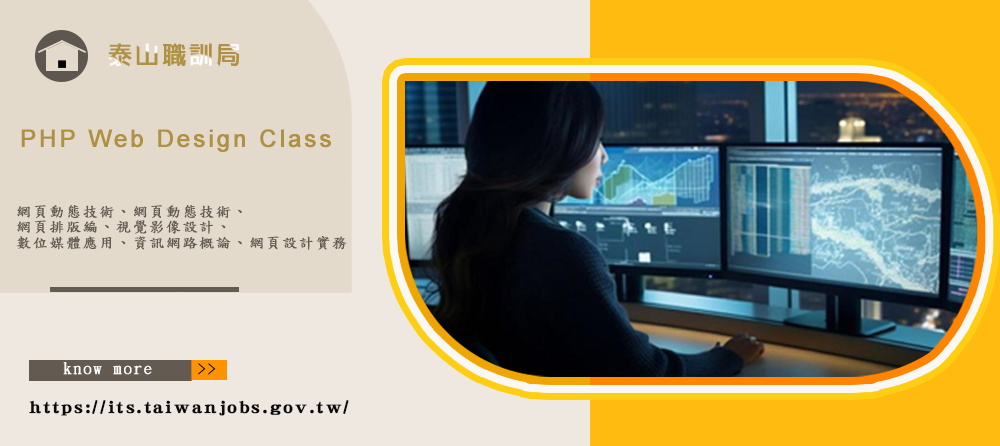
<style>
.page{position:relative;width:1000px;height:446px}
.page>*{position:absolute;margin:0}
.t1{font:24px "AdobeFanHeitiStd-Bold";letter-spacing:0.1em;color:#b09041;font-weight:bold}
.t2{font:24px "ArialMT";letter-spacing:0.1em;color:#b09041;font-weight:bold}
.t3{font:14.7px/16px "DFKaiShu-SB-Estd-BF";letter-spacing:0.1em;color:#625b52;font-weight:bold}
.t4{font:16px "DFKaiShu-SB-Estd-BF";letter-spacing:0.1em;color:#ffffff;font-weight:bold}
.t5{font:12px "DFKaiShu-SB-Estd-BF";letter-spacing:0.1em;color:#050505;font-weight:bold}
.t6{font:18.7px "DFShiYiStd-W5";letter-spacing:0.1em;color:#0a0a0a;font-weight:bold}
</style>
<div class="page">
<p class="t1" style="left:108px;top:43px;width:131px;height:23px">泰山職訓局</p>
<p class="t2" style="left:21px;top:129px;width:310px;height:23px">PHP Web Design Class</p>
<p class="t3" style="left:16px;top:205px;width:331px;height:45px">網頁動態技術、網頁動態技術、 <br>網頁排版編、視覺影像設計、<br>數位媒體應用、資訊網路概論、網頁設計實務</p>
<p class="t4" style="left:63px;top:362px;width:89px;height:13px">know more</p>
<p class="t5" style="left:198px;top:363px;width:18px;height:12px">&gt;&gt;</p>
<p class="t6" style="left:29px;top:400px;width:320px;height:16px">https://its.taiwanjobs.gov.tw/</p>
</div>
